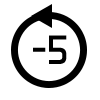
<style>
.page{position:relative;width:100px;height:100px;background:#ffffff}
.page>*{position:absolute;margin:0}
.t1{font:41.7px "AeroMaticsDisplayRegular";color:#000000}
</style>
<div class="page">
<p class="t1" style="left:33px;top:35px;width:34px;height:29px">-5</p>
</div>
